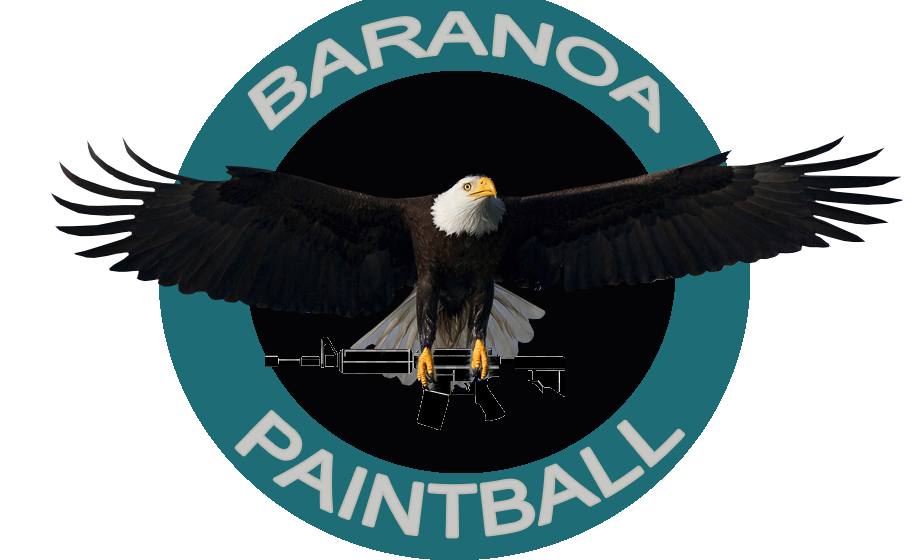
<style>
.page{position:relative;width:919px;height:560px;background:#ffffff}
.page>*{position:absolute;margin:0}
.t1{font:65px "ArialMT";color:#c7c7c5;scale:1.09 1}
.t2{font:69.2px "ArialMT";color:#c7c7c5}
</style>
<div class="page">
<p class="t1" style="left:249px;top:13px;width:409px;height:119px;rotate:2deg">BARANOA</p>
<p class="t2" style="left:236px;top:411px;width:448px;height:126px;rotate:-1deg">PAINTBALL</p>
</div>
